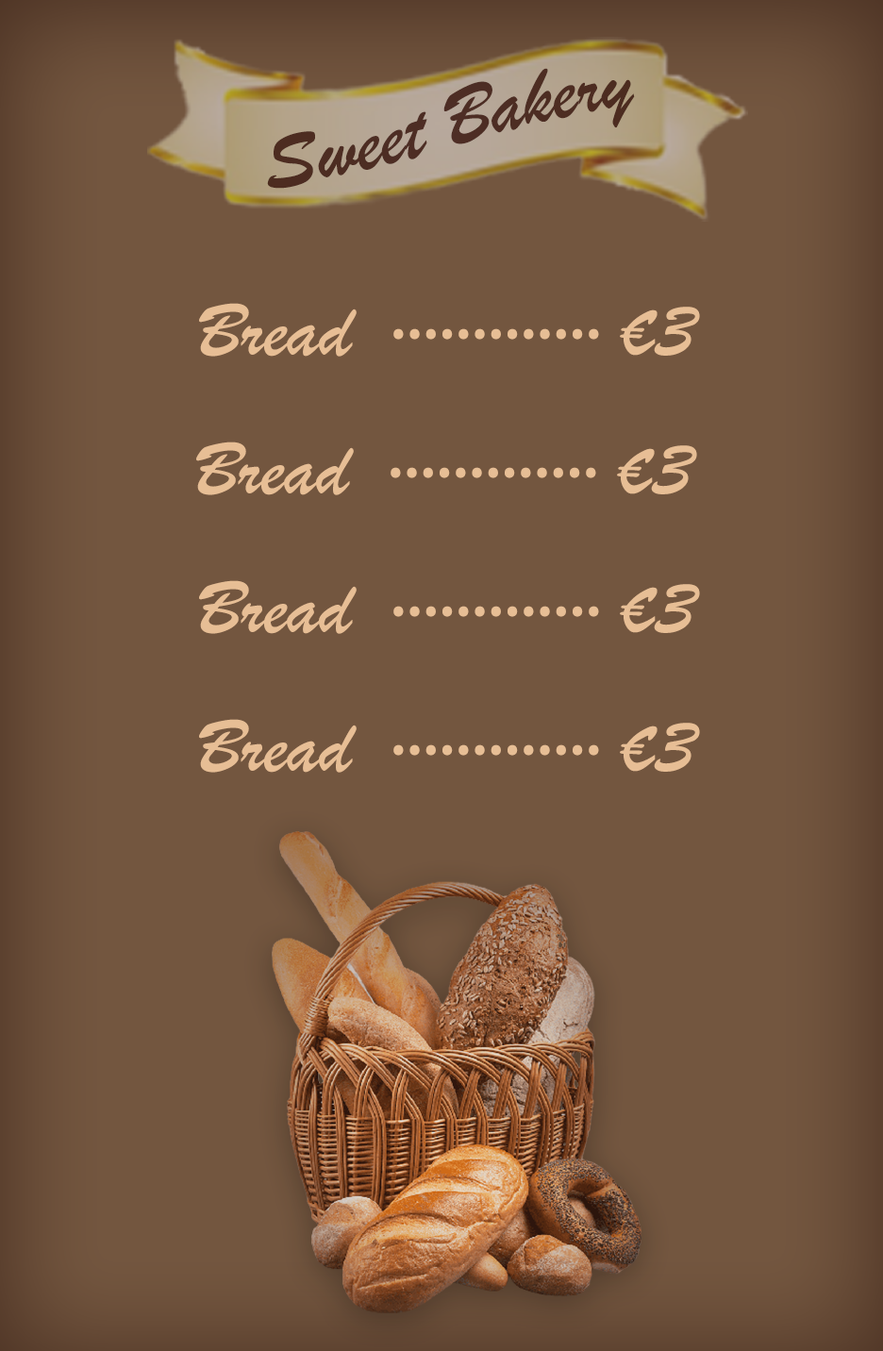
<style>
.page{position:relative;width:883px;height:1351px;background:#73563f}
.page>*{position:absolute;margin:0}
.t1{font:82.9px "BrushScriptMT";color:#3d150b}
.t2{font:78.6px "MyriadPro-Regular";color:#e7be95}
.t3{font:78.6px "BrushScriptMT";color:#e7be95}
</style>
<div class="page">
<p class="t1" style="left:267px;top:68px;width:368px;height:121px;rotate:-12deg;opacity:0.9">Sweet Bakery</p>
<p class="t2" style="left:199px;top:303px;width:501px;height:54px"><span class="t3">  Bread </span> ············· <span class="t3">€3</span></p>
<p class="t2" style="left:196px;top:441px;width:501px;height:54px"><span class="t3">  Bread </span> ············· <span class="t3">€3</span></p>
<p class="t2" style="left:199px;top:580px;width:501px;height:54px"><span class="t3">  Bread </span> ············· <span class="t3">€3</span></p>
<p class="t2" style="left:199px;top:719px;width:501px;height:53px"><span class="t3">  Bread </span> ············· <span class="t3">€3</span></p>
</div>
